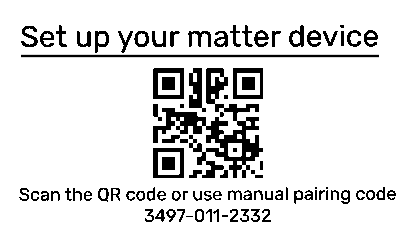
<style>
.page{position:relative;width:416px;height:240px;background:#ffffff}
.page>*{position:absolute;margin:0}
.t1{font:30px "RubikLight-Regular";color:#000000}
.t2{font:18px "RubikLight-Regular";color:#000000}
</style>
<div class="page">
<p class="t1" style="left:21px;top:24px;width:357px;height:29px">Set up your matter device</p>
<p class="t2" style="left:19px;top:187px;width:377px;height:36px;text-align:center">Scan the QR code or use manual pairing code<br>3497-011-2332</p>
</div>
